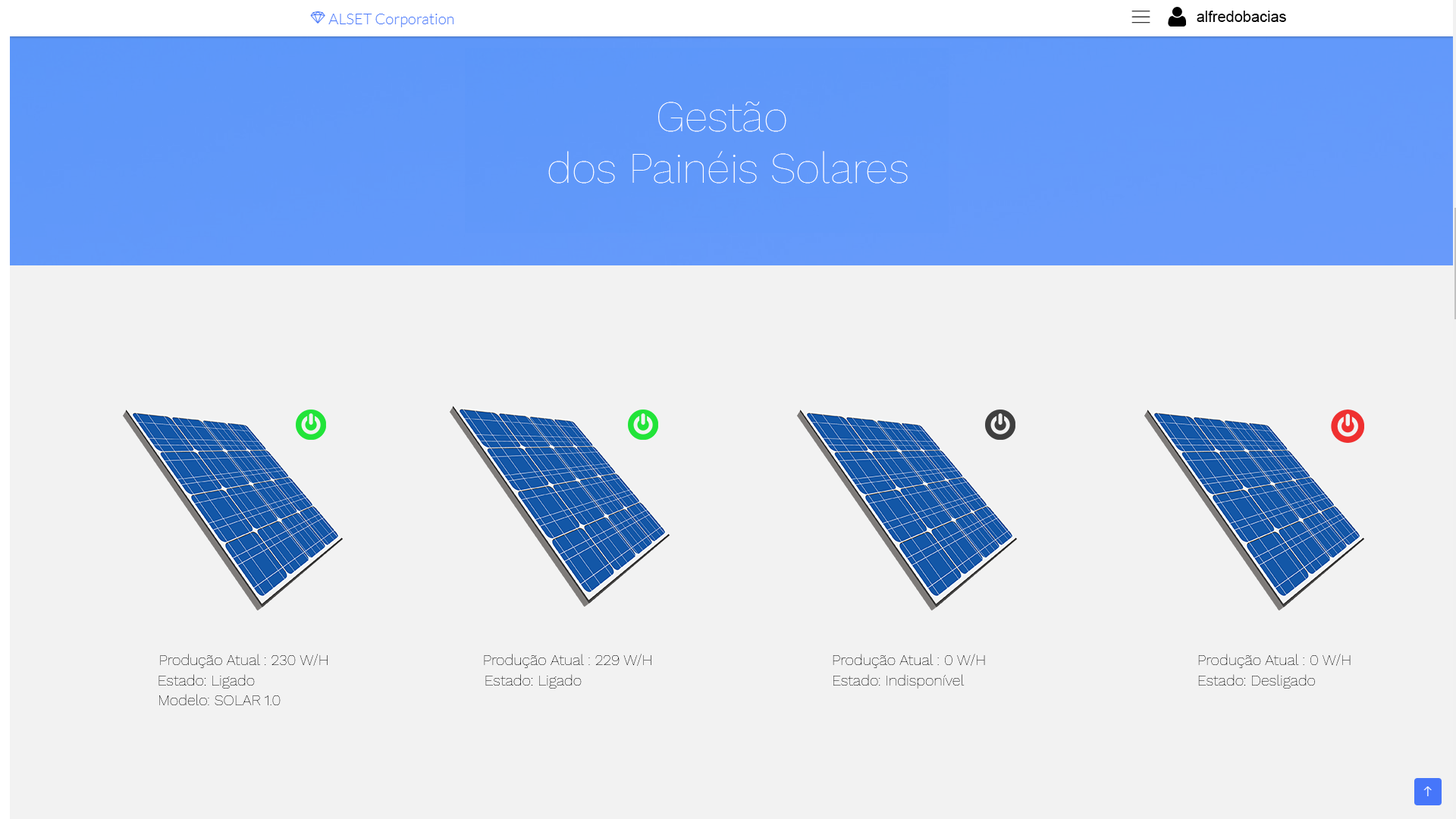
<style>
.page{position:relative;width:1456px;height:819px;background:#f2f2f2}
.page>*{position:absolute;margin:0}
.t1{font:15.2px "ArialMT";color:#000000}
.t2{font:42.7px "WorkSans-Thin";color:#ffffff}
.t3{font:15.2px "WorkSans-Thin";color:#000000}
</style>
<div class="page">
<p class="t1" style="left:1197px;top:11px;width:89px;height:11px">alfredobacias</p>
<p class="t2" style="left:548px;top:102px;width:360px;height:82px;text-align:center">Gestão <br>dos Painéis Solares</p>
<p class="t3" style="left:160px;top:654px;width:168px;height:14px">Produção Atual : 230 W/H</p>
<p class="t3" style="left:484px;top:654px;width:167px;height:14px">Produção Atual : 229 W/H</p>
<p class="t3" style="left:833px;top:654px;width:152px;height:14px">Produção Atual : 0 W/H</p>
<p class="t3" style="left:1198px;top:654px;width:153px;height:14px">Produção Atual : 0 W/H</p>
<p class="t3" style="left:158px;top:674px;width:97px;height:15px">Estado: Ligado</p>
<p class="t3" style="left:485px;top:674px;width:97px;height:15px">Estado: Ligado</p>
<p class="t3" style="left:833px;top:674px;width:132px;height:15px">Estado: Indisponível</p>
<p class="t3" style="left:1198px;top:674px;width:117px;height:15px">Estado: Desligado</p>
<p class="t3" style="left:159px;top:694px;width:122px;height:11px">Modelo: SOLAR 1.0</p>
</div>
